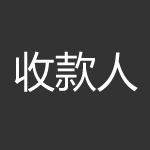
<style>
.page{position:relative;width:150px;height:150px;background:#333333}
.page>*{position:absolute;margin:0}
.t1{font:41.7px "MicrosoftYaHei";color:#ffffff}
</style>
<div class="page">
<p class="t1" style="left:14px;top:51px;width:124px;height:41px">收款人</p>
</div>
